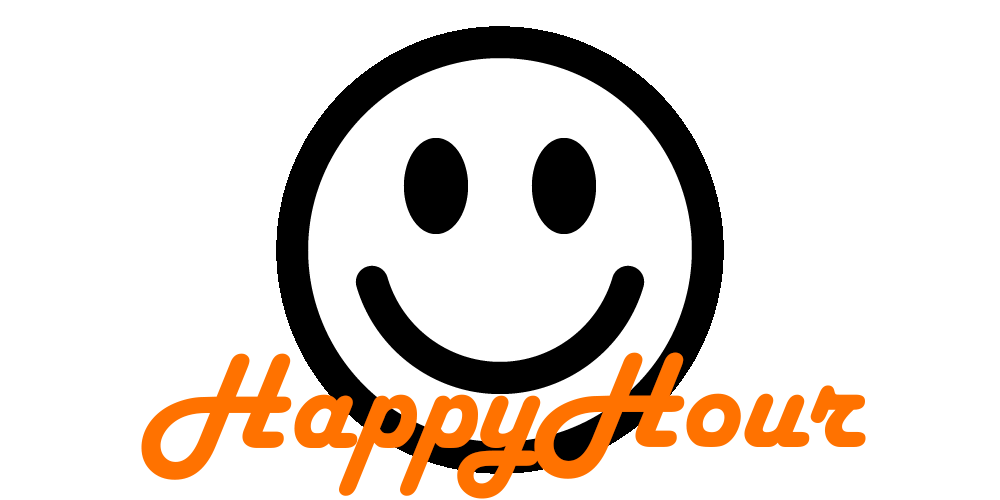
<style>
.page{position:relative;width:1000px;height:500px;background:#ffffff}
.page>*{position:absolute;margin:0}
.t1{font:140px "HarlowSolid";color:#ff7200}
</style>
<div class="page">
<p class="t1" style="left:141px;top:352px;width:725px;height:147px">HappyHour</p>
</div>
